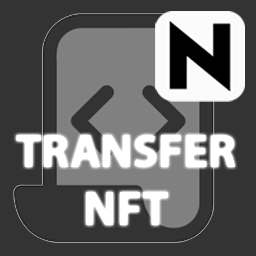
<style>
.page{position:relative;width:256px;height:256px;background:#333333}
.page>*{position:absolute;margin:0}
.t1{font:47px "MyriadPro-Bold";color:#ffffff}
.t2{font:48px "MyriadPro-Bold";color:#ffffff}
</style>
<div class="page">
<p class="t1" style="left:16px;top:135px;width:220px;height:90px;text-align:center">TRANSFER<br><span class="t2">NFT</span></p>
</div>
